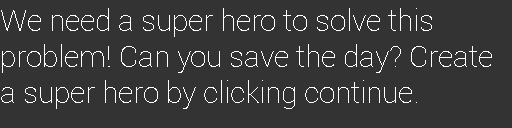
<style>
.page{position:relative;width:512px;height:128px;background:#333333}
.page>*{position:absolute;margin:0}
.t1{font:30px "Roboto-Thin";color:#ffffff}
</style>
<div class="page">
<p class="t1" style="left:1px;top:8px;width:491px;height:101px">We need a super hero to solve this <br>problem! Can you save the day? Create a super hero by clicking continue.</p>
</div>
